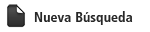
<style>
.page{position:relative;width:150px;height:32px;background:#ffffff}
.page>*{position:absolute;margin:0}
.t1{font:14px "FrutigerLT-BoldCn";letter-spacing:0.005em;color:#272727}
</style>
<div class="page">
<p class="t1" style="left:34px;top:11px;width:99px;height:14px">Nueva Búsqueda</p>
</div>
